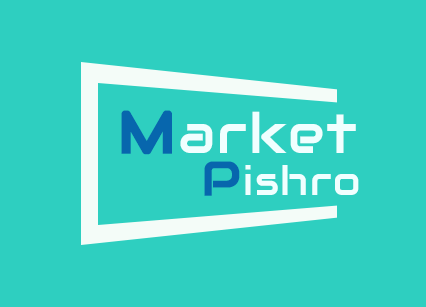
<style>
.page{position:relative;width:426px;height:307px;background:#2ecfc0}
.page>*{position:absolute;margin:0}
.t1{font:55px "Audiowide-Regular";letter-spacing:0.04em;color:#f0ffff}
.t2{font:60px "Audiowide-Regular";letter-spacing:0.04em;color:#0766ad;font-weight:bold}
.t3{font:40px "Audiowide-Regular";letter-spacing:0.04em;color:#f0ffff}
.t4{font:48px "Audiowide-Regular";letter-spacing:0.04em;color:#0766ad;font-weight:bold}
</style>
<div class="page">
<p class="t1" style="left:121px;top:110px;width:235px;height:45px"><span class="t2">M</span>arket</p>
<p class="t3" style="left:204px;top:161px;width:155px;height:35px"><span class="t4">P</span>ishro</p>
</div>
